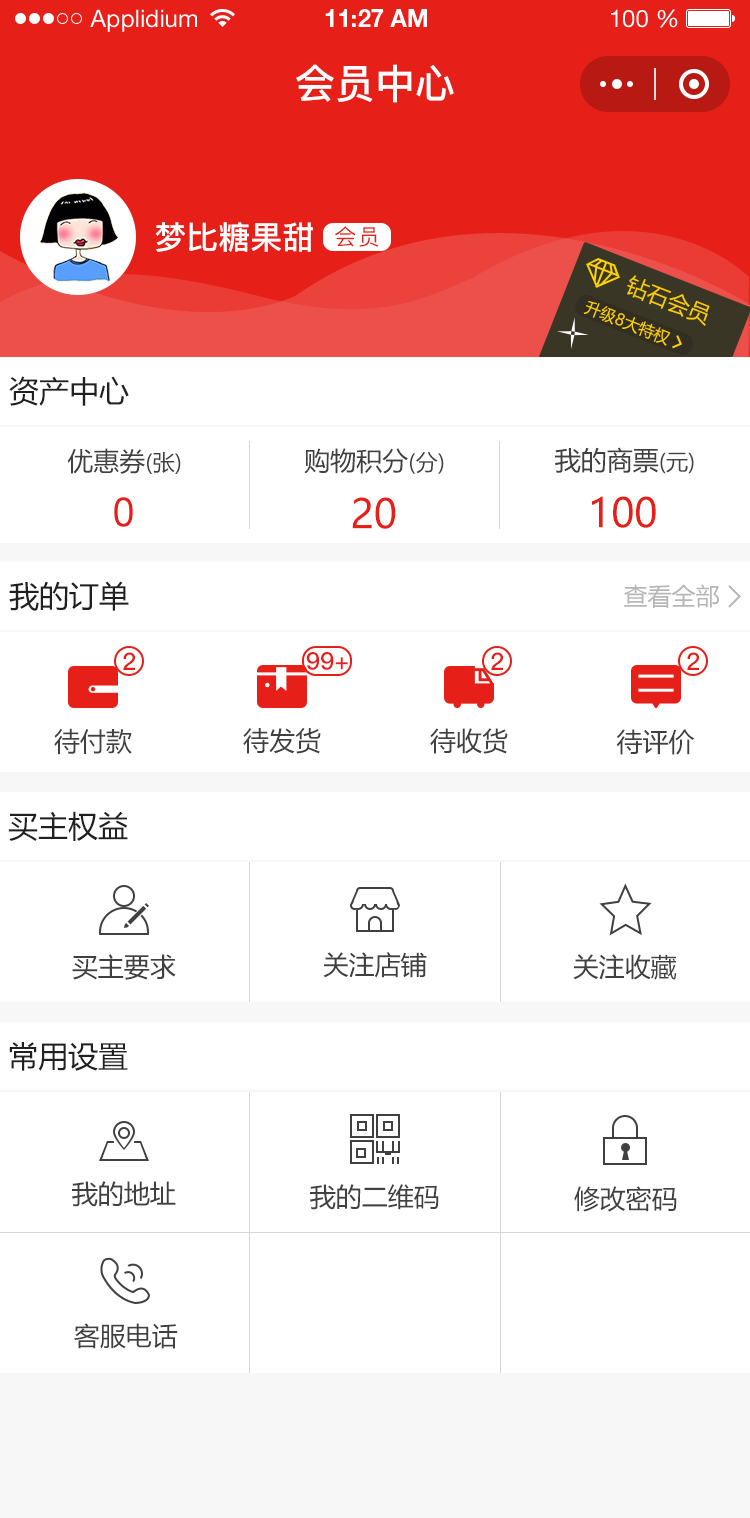
<style>
.page{position:relative;width:750px;height:1518px;background:#ffffff}
.page>*{position:absolute;margin:0}
.t1{font:24px "HelveticaNeueLTStd-Roman";color:#ffffff}
.t2{font:24px "HelveticaNeueLTStd-Bd";color:#ffffff}
.t3{font:40px "PingFang-SC-Bold";color:#ffffff;text-transform:uppercase}
.t4{font:32px "PingFang-SC-Bold";color:#ffffff;text-transform:uppercase}
.t5{font:22px "PingFang-SC-Medium";letter-spacing:0.08em;color:#e61f18}
.t6{font:22.1px "MicrosoftYaHei";color:#f9cd02;text-transform:uppercase}
.t7{font:16px "MicrosoftYaHei";color:#ffd100;text-transform:uppercase}
.t8{font:30px "MicrosoftYaHei";color:#202020;text-transform:uppercase}
.t9{font:26px "MicrosoftYaHei";color:#404040;text-transform:uppercase}
.t10{font:22px "MicrosoftYaHei";color:#404040;text-transform:uppercase}
.t11{font:40px "ArialMT";color:#e61f18;text-transform:uppercase}
.t12{font:40px "MicrosoftYaHei";color:#e61f18;text-transform:uppercase}
.t13{font:24px "MicrosoftYaHei";color:#b6b6b6;text-transform:uppercase}
.t14{font:24px "PingFang-SC-Bold";color:#e61f18;text-transform:uppercase}
</style>
<div class="page">
<p class="t1" style="left:90px;top:9px;width:107px;height:23px">Applidium</p>
<p class="t2" style="left:325px;top:9px;width:102px;height:18px">11:27 AM</p>
<p class="t1" style="left:611px;top:9px;width:67px;height:19px">100 %</p>
<p class="t3" style="left:296px;top:64px;width:158px;height:39px">会员中心</p>
<p class="t4" style="left:155px;top:222px;width:158px;height:30px">梦比糖果甜</p>
<p class="t5" style="left:335px;top:226px;width:44px;height:21px">会员</p>
<p class="t6" style="left:627px;top:275px;width:83px;height:51px;rotate:22deg">钻石会员</p>
<p class="t7" style="left:583px;top:301px;width:88px;height:45px;rotate:22deg">升级8大特权</p>
<p class="t8" style="left:9px;top:376px;width:120px;height:30px">资产中心</p>
<p class="t9" style="left:67px;top:448px;width:114px;height:26px">优惠券<span class="t10">(张)</span></p>
<p class="t9" style="left:304px;top:448px;width:140px;height:26px">购物积分<span class="t10">(分)</span></p>
<p class="t9" style="left:555px;top:447px;width:139px;height:27px">我的商票<span class="t10">(元)</span></p>
<p class="t11" style="left:114px;top:497px;width:19px;height:30px">0</p>
<p class="t12" style="left:352px;top:497px;width:44px;height:32px">20</p>
<p class="t12" style="left:592px;top:496px;width:64px;height:32px">100</p>
<p class="t8" style="left:9px;top:581px;width:120px;height:30px">我的订单</p>
<p class="t13" style="left:624px;top:584px;width:95px;height:24px">查看全部</p>
<p class="t14" style="left:123px;top:652px;width:12px;height:18px">2</p>
<p class="t14" style="left:306px;top:652px;width:42px;height:18px">99+</p>
<p class="t14" style="left:491px;top:652px;width:12px;height:18px">2</p>
<p class="t14" style="left:687px;top:652px;width:12px;height:18px">2</p>
<p class="t9" style="left:54px;top:728px;width:78px;height:27px">待付款</p>
<p class="t9" style="left:243px;top:727px;width:78px;height:27px">待发货</p>
<p class="t9" style="left:430px;top:728px;width:78px;height:26px">待收货</p>
<p class="t9" style="left:616px;top:729px;width:78px;height:26px">待评价</p>
<p class="t8" style="left:8px;top:811px;width:120px;height:30px">买主权益</p>
<p class="t9" style="left:323px;top:952px;width:104px;height:26px">关注店铺</p>
<p class="t9" style="left:72px;top:954px;width:104px;height:26px">买主要求</p>
<p class="t9" style="left:573px;top:954px;width:104px;height:26px">关注收藏</p>
<p class="t8" style="left:9px;top:1042px;width:119px;height:29px">常用设置</p>
<p class="t9" style="left:72px;top:1181px;width:104px;height:26px">我的地址</p>
<p class="t9" style="left:310px;top:1184px;width:129px;height:26px">我的二维码</p>
<p class="t9" style="left:574px;top:1186px;width:103px;height:26px">修改密码</p>
<p class="t9" style="left:74px;top:1323px;width:104px;height:26px">客服电话</p>
</div>
